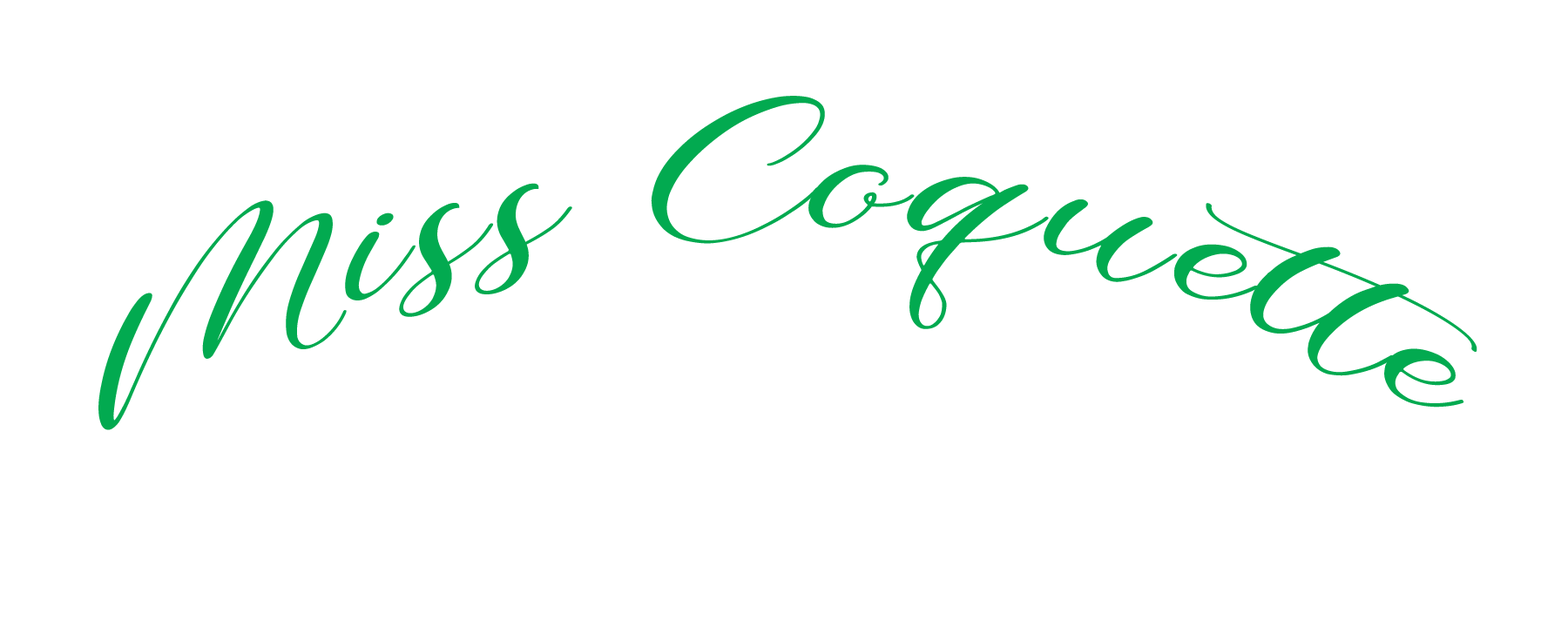
<style>
.page{position:relative;width:1568px;height:627px;background:#ffffff}
.page>*{position:absolute;margin:0}
.t1{font:188.2px "girly";color:#02aa50;font-weight:bold;scale:1.2 1}
</style>
<div class="page">
<p class="t1" style="left:98px;top:96px;width:1379px;height:334px">Miss Coquette</p>
</div>
